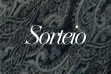
<style>
.page{position:relative;width:111px;height:74px}
.page>*{position:absolute;margin:0}
.t1{font:25.9px "Didot-Italic";letter-spacing:-0.1em;color:#ffffff}
</style>
<div class="page">
<p class="t1" style="left:25px;top:25px;width:61px;height:20px">Sorteio</p>
</div>
